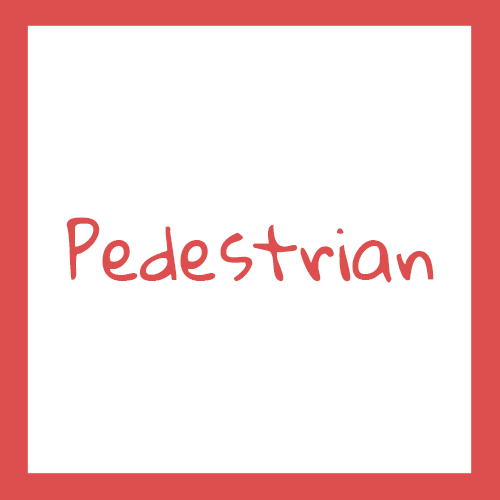
<style>
.page{position:relative;width:500px;height:500px;background:#ffffff}
.page>*{position:absolute;margin:0}
.t1{font:72.1px "GloriaHallelujah";color:#dd4e4e}
</style>
<div class="page">
<p class="t1" style="left:66px;top:217px;width:368px;height:66px">Pedestrian</p>
</div>
